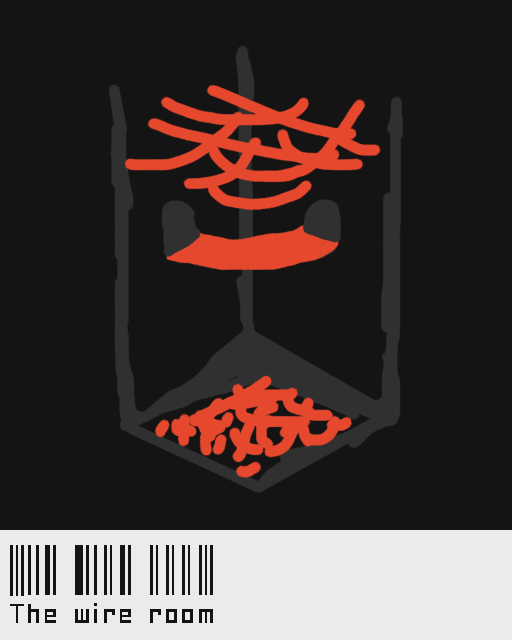
<style>
.page{position:relative;width:512px;height:640px;background:#141414}
.page>*{position:absolute;margin:0}
.t1{font:72px "Paskowy";color:#141414}
</style>
<div class="page">
<p class="t1" style="left:10px;top:545px;width:203px;height:78px">The wire room</p>
</div>
